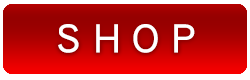
<style>
.page{position:relative;width:250px;height:80px}
.page>*{position:absolute;margin:0}
.t1{font:38.6px "LiHeiPro";color:#ffffff}
</style>
<div class="page">
<p class="t1" style="left:58px;top:24px;width:137px;height:29px">ＳＨＯＰ</p>
</div>
